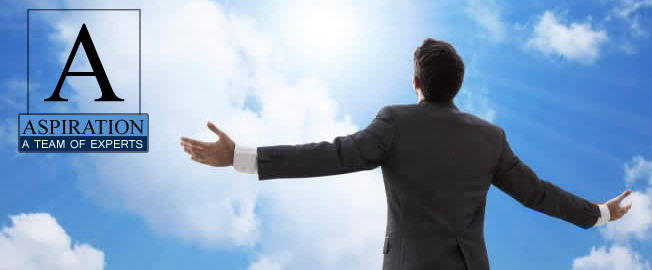
<style>
.page{position:relative;width:652px;height:270px}
.page>*{position:absolute;margin:0}
.t1{font:21px "TimesNewRomanPSMT";color:#000000}
.t2{font:14.5px "Tunga";color:#ffffff}
</style>
<div class="page">
<p class="t1" style="left:22px;top:119px;width:123px;height:16px">ASPIRATION</p>
<p class="t2" style="left:22px;top:140px;width:121px;height:9px">A TEAM OF EXPERTS</p>
</div>
